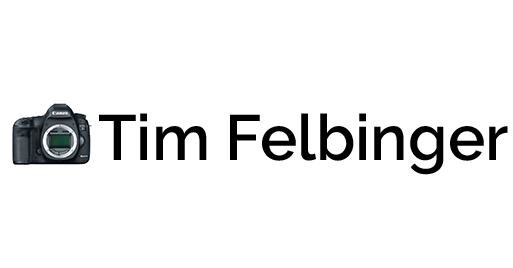
<style>
.page{position:relative;width:513px;height:268px;background:#ffffff}
.page>*{position:absolute;margin:0}
.t1{font:63.7px "Raleway-SemiBold";color:#000000}
</style>
<div class="page">
<p class="t1" style="left:99px;top:113px;width:409px;height:62px">Tim Felbinger</p>
</div>
